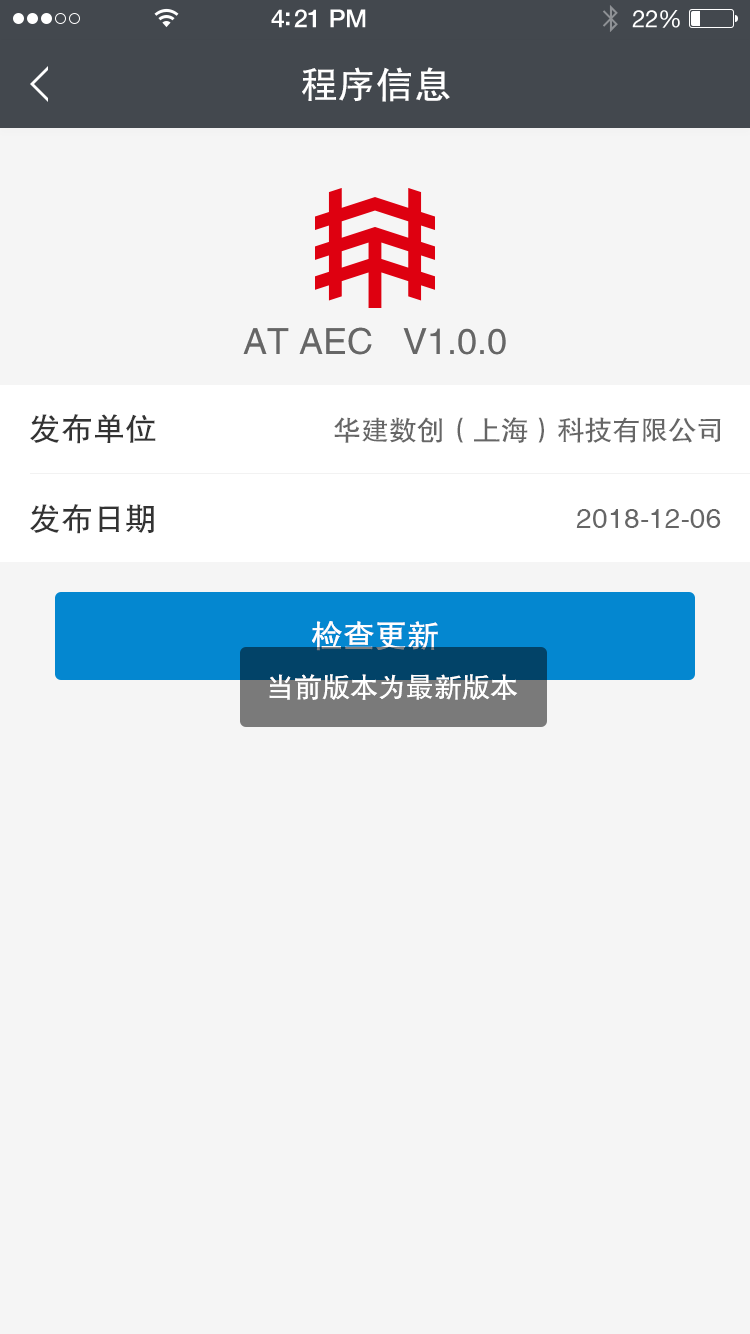
<style>
.page{position:relative;width:750px;height:1334px;background:#f5f5f5}
.page>*{position:absolute;margin:0}
.t1{font:38px "FZHTJW--GB1-0";color:#ffffff}
.t2{font:36px "FZHTJW--GB1-0";color:#666666}
.t3{font:32.1px "FZHTJW--GB1-0";color:#333333}
.t4{font:28px "FZHTJW--GB1-0";color:#666666}
.t5{font:28px "Helvetica";color:#666666}
.t6{font:32px "FZHTJW--GB1-0";color:#fffefe}
.t7{font:28px "FZHTJW--GB1-0";color:#ffffff}
</style>
<div class="page">
<p class="t1" style="left:302px;top:67px;width:148px;height:35px">程序信息</p>
<p class="t2" style="left:243px;top:327px;width:263px;height:28px">AT AEC   V1.0.0</p>
<p class="t3" style="left:30px;top:414px;width:126px;height:30px">发布单位</p>
<p class="t4" style="left:334px;top:417px;width:387px;height:26px">华建数创（上海）科技有限公司</p>
<p class="t3" style="left:30px;top:504px;width:124px;height:30px">发布日期</p>
<p class="t5" style="left:576px;top:509px;width:145px;height:19px">2018-12-06</p>
<p class="t6" style="left:312px;top:621px;width:126px;height:30px">检查更新</p>
<p class="t7" style="left:269px;top:674px;width:249px;height:26px">当前版本为最新版本</p>
</div>
